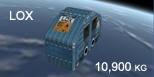
<style>
.page{position:relative;width:154px;height:77px}
.page>*{position:absolute;margin:0}
.t1{font:12px "ArialMT";color:#fcfcfc;font-variant:small-caps}
</style>
<div class="page">
<p class="t1" style="left:10px;top:11px;width:24px;height:9px">LOX</p>
<p class="t1" style="left:95px;top:62px;width:52px;height:11px">10,900 kg</p>
</div>
